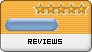
<style>
.page{position:relative;width:92px;height:52px}
.page>*{position:absolute;margin:0}
.t1{font:8px "04b03b";color:#000000}
</style>
<div class="page">
<p class="t1" style="left:28px;top:39px;width:34px;height:5px">REVIEWS</p>
</div>
